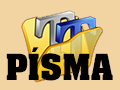
<style>
.page{position:relative;width:120px;height:90px;background:#f2d4a2}
.page>*{position:absolute;margin:0}
.t1{font:30.7px "Aardvark-Bold";color:#000000;text-transform:uppercase}
</style>
<div class="page">
<p class="t1" style="left:6px;top:47px;width:107px;height:34px">písma</p>
</div>
